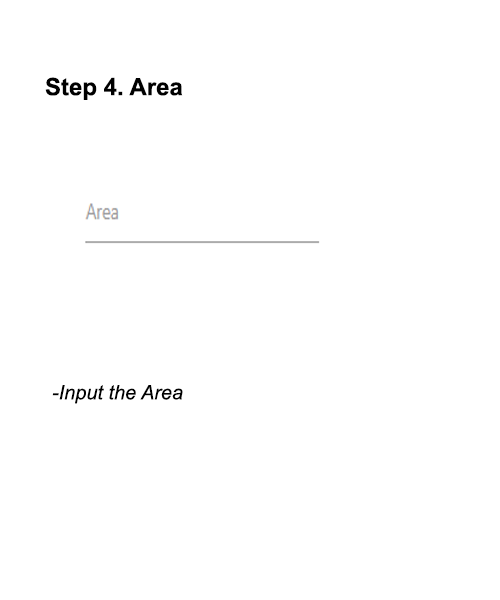
<style>
.page{position:relative;width:500px;height:600px;background:#ffffff}
.page>*{position:absolute;margin:0}
.t1{font:24px "Arial-BoldMT";color:#000000}
.t2{font:20px "Arial-ItalicMT";color:#000000}
</style>
<div class="page">
<p class="t1" style="left:45px;top:77px;width:138px;height:23px">Step 4. Area</p>
<p class="t2" style="left:52px;top:385px;width:131px;height:19px">-Input the Area</p>
</div>
